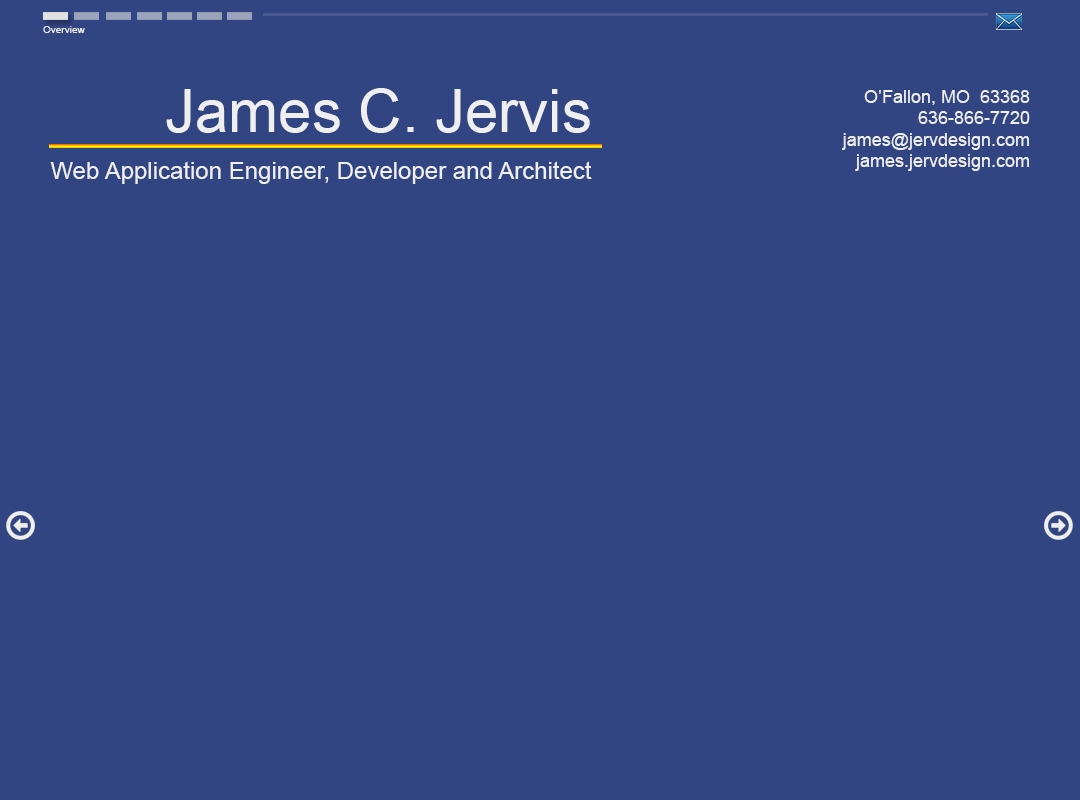
<style>
.page{position:relative;width:1080px;height:800px;background:#324583}
.page>*{position:absolute;margin:0}
.t1{font:10px "ArialMT";color:#eeeeee}
.t2{font:60px "ArialMT";color:#efefef}
.t3{font:18px "ArialMT";color:#efefef}
.t4{font:24px "ArialMT";color:#efefef}
</style>
<div class="page">
<p class="t1" style="left:43px;top:26px;width:42px;height:7px">Overview</p>
<p class="t2" style="left:166px;top:88px;width:424px;height:45px">James C. Jervis</p>
<p class="t3" style="left:841px;top:90px;width:189px;height:81px;text-align:right">O’Fallon, MO  63368<br>636-866-7720<br>james@jervdesign.com<br>james.jervdesign.com</p>
<p class="t4" style="left:50px;top:161px;width:542px;height:23px">Web Application Engineer, Developer and Architect</p>
</div>
